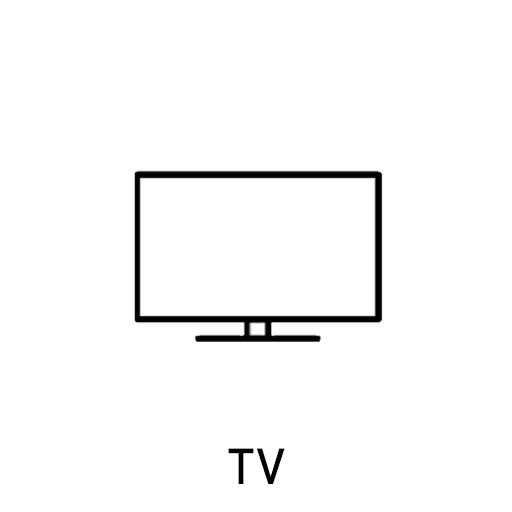
<style>
.page{position:relative;width:512px;height:512px;background:#ffffff}
.page>*{position:absolute;margin:0}
.t1{font:50px "Bahnschrift";color:#000000}
</style>
<div class="page">
<p class="t1" style="left:228px;top:448px;width:57px;height:36px">TV</p>
</div>
